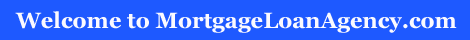
<style>
.page{position:relative;width:470px;height:40px;background:#1e59ff}
.page>*{position:absolute;margin:0}
.t1{font:22px "Georgia-Bold";color:#fbfaff}
</style>
<div class="page">
<p class="t1" style="left:15px;top:11px;width:442px;height:22px">Welcome to MortgageLoanAgency.com</p>
</div>
